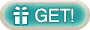
<style>
.page{position:relative;width:90px;height:30px}
.page>*{position:absolute;margin:0}
.t1{font:18px "FutoGoB101Pr5-Bold";letter-spacing:-0.04em;color:#ffffff}
</style>
<div class="page">
<p class="t1" style="left:35px;top:8px;width:39px;height:15px">GET!</p>
</div>
